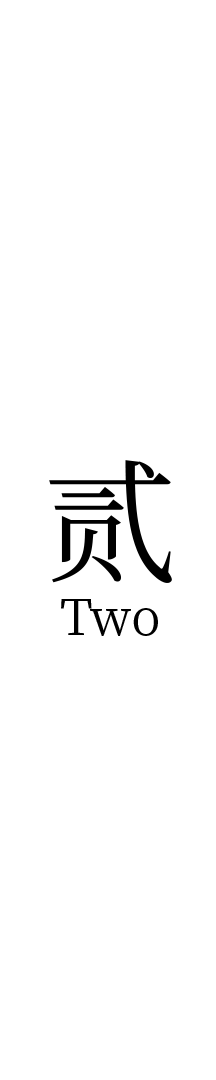
<style>
.page{position:relative;width:216px;height:1080px;background:#ffffff}
.page>*{position:absolute;margin:0}
.t1{font:133.3px "NotoSerifCJKsc-Regular";color:#000000}
.t2{font:50px "NotoSerifCJKsc-Regular";color:#000000}
</style>
<div class="page">
<p class="t1" style="left:49px;top:460px;width:123px;height:123px">贰</p>
<p class="t2" style="left:61px;top:599px;width:97px;height:37px">Two</p>
</div>
